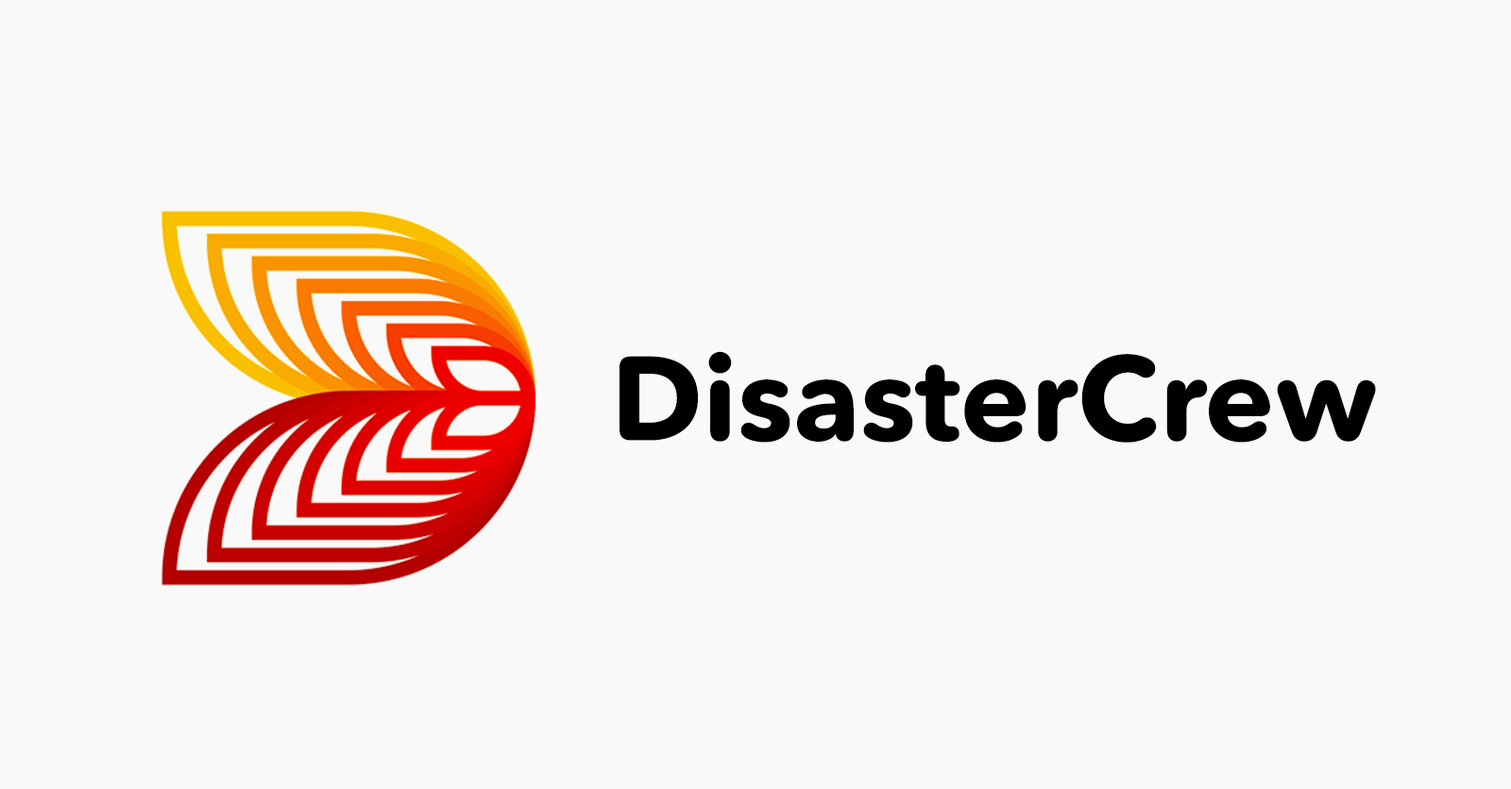
<style>
.page{position:relative;width:1511px;height:789px;background:#f9f9f9}
.page>*{position:absolute;margin:0}
.t1{font:118.2px "AvenirNextRoundedPro-Bold";color:#000000}
</style>
<div class="page">
<p class="t1" style="left:619px;top:351px;width:757px;height:92px">DisasterCrew</p>
</div>
